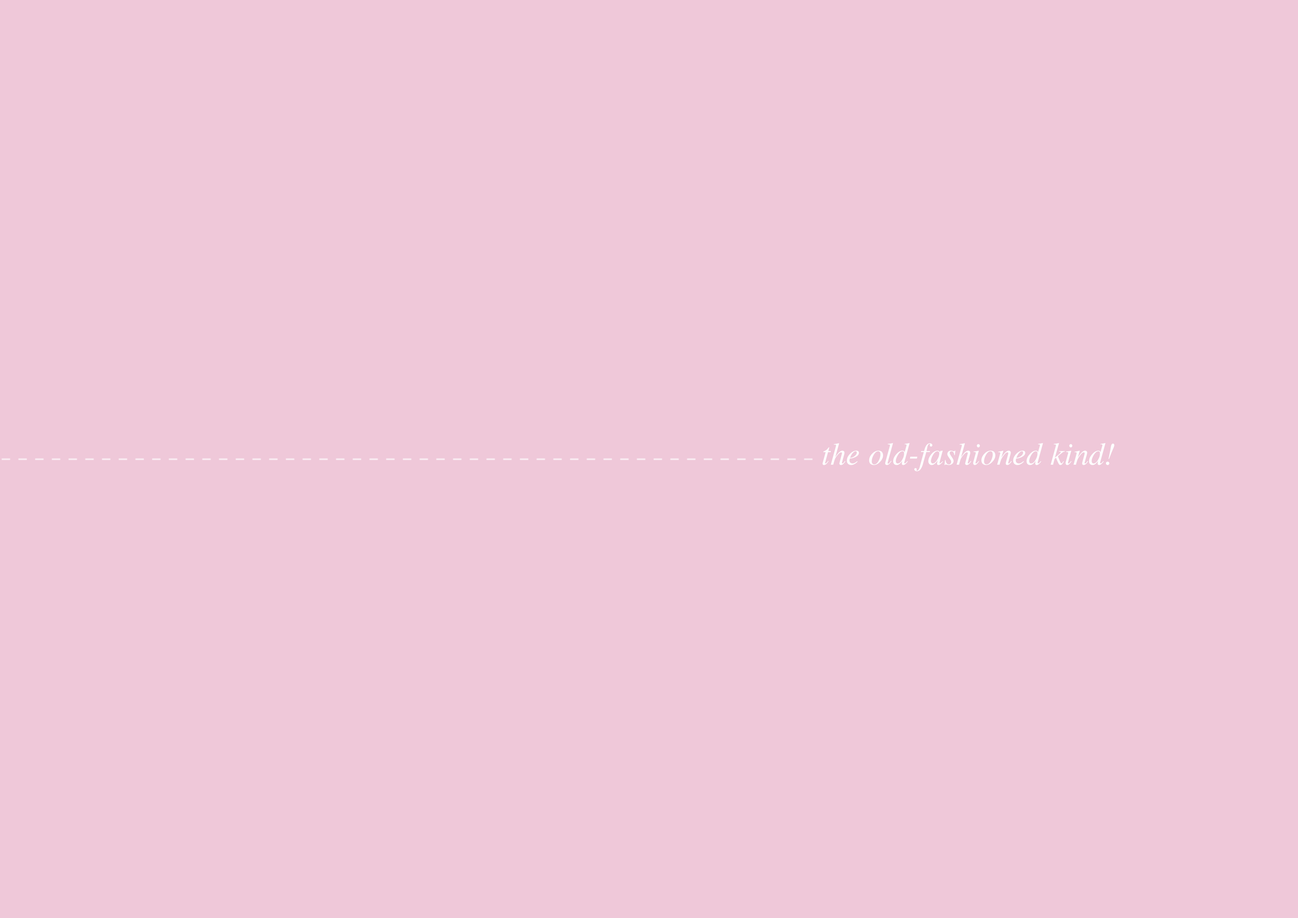
<style>
.page{position:relative;width:1298px;height:918px;background:#efc8d9}
.page>*{position:absolute;margin:0}
.t1{font:31.7px "Times-Italic";color:#fefefe}
</style>
<div class="page">
<p class="t1" style="left:823px;top:443px;width:292px;height:29px">the old-fashioned kind!</p>
</div>
